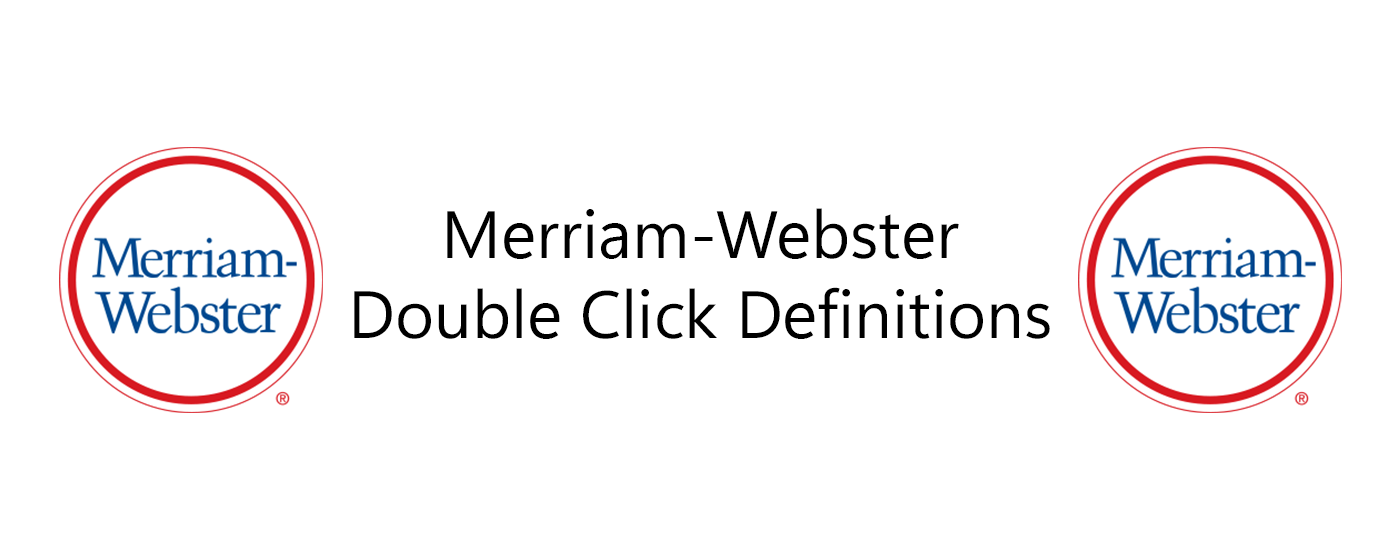
<style>
.page{position:relative;width:1400px;height:560px;background:#ffffff}
.page>*{position:absolute;margin:0}
.t1{font:66.6px "SegoeUIVariable";color:#000000}
</style>
<div class="page">
<p class="t1" style="left:354px;top:208px;width:696px;height:131px;text-align:center">Merriam-Webster<br>Double Click Definitions</p>
</div>
